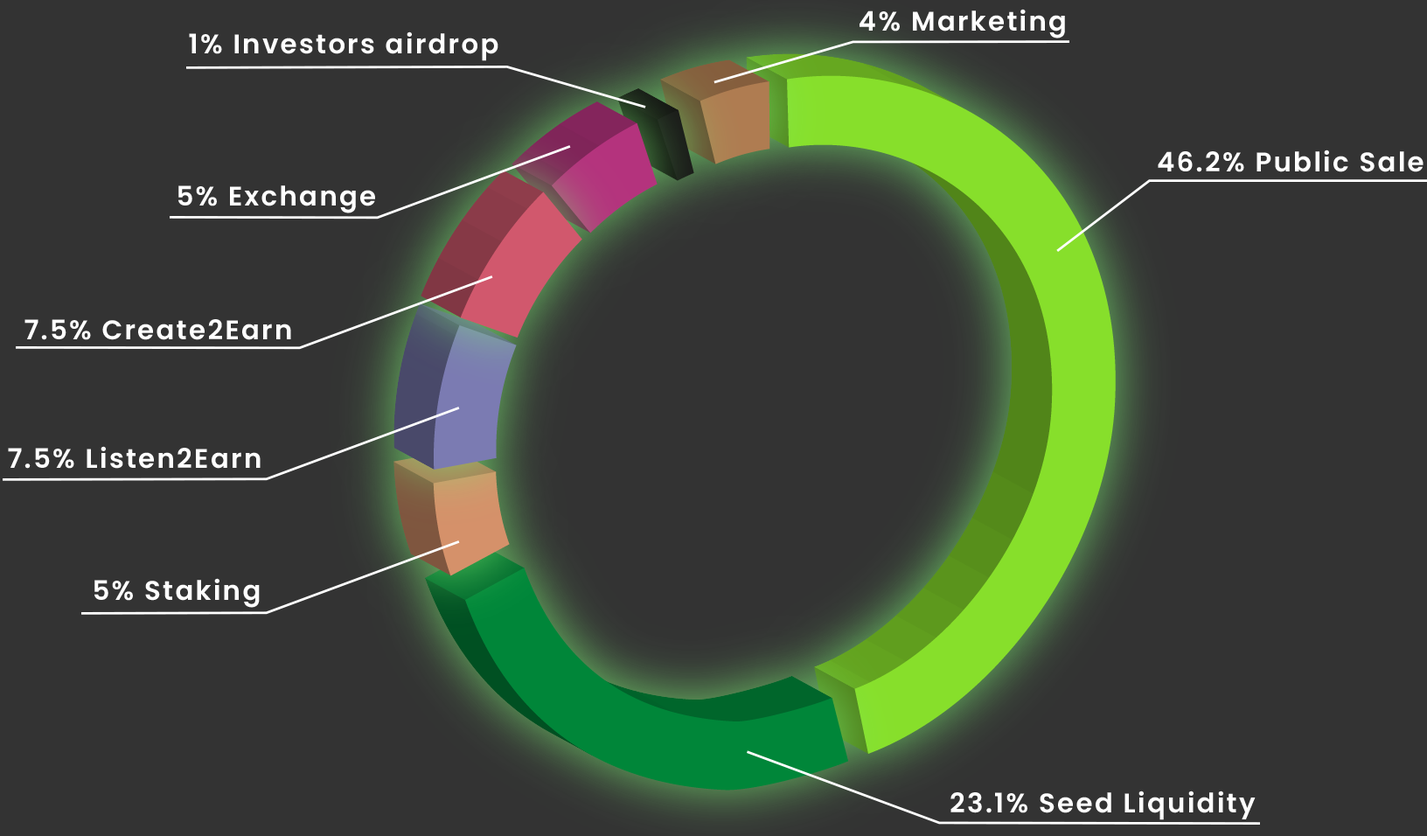
<style>
.page{position:relative;width:1427px;height:836px;background:#333333}
.page>*{position:absolute;margin:0}
.t1{font:26.9px "Poppins-SemiBold";letter-spacing:0.075em;color:#ffffff}
</style>
<div class="page">
<p class="t1" style="left:859px;top:9px;width:206px;height:29px">4% Marketing</p>
<p class="t1" style="left:189px;top:31px;width:309px;height:30px">1% Investors airdrop</p>
<p class="t1" style="left:1157px;top:149px;width:266px;height:23px">46.2% Public Sale</p>
<p class="t1" style="left:178px;top:185px;width:197px;height:28px">5% Exchange</p>
<p class="t1" style="left:24px;top:319px;width:267px;height:21px">7.5% Create2Earn</p>
<p class="t1" style="left:8px;top:446px;width:253px;height:23px">7.5% Listen2Earn</p>
<p class="t1" style="left:94px;top:578px;width:166px;height:30px">5% Staking</p>
<p class="t1" style="left:950px;top:790px;width:305px;height:30px">23.1% Seed Liquidity</p>
</div>
